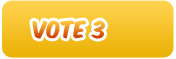
<style>
.page{position:relative;width:176px;height:59px}
.page>*{position:absolute;margin:0}
.t1{font:20px "KomikaAxis"}
</style>
<div class="page">
<p class="t1" style="left:32px;top:20px;width:73px;height:19px">Vote 3</p>
</div>
